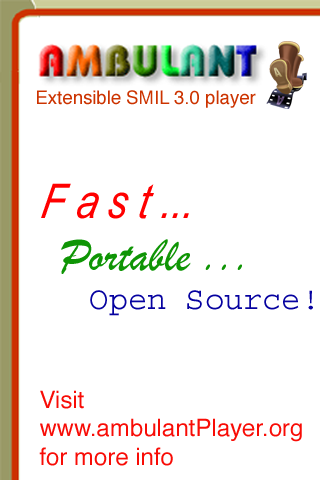
<style>
.page{position:relative;width:320px;height:480px;background:#ffffff}
.page>*{position:absolute;margin:0}
.t1{font:18.6px "Helvetica";color:#cc3300}
.t2{font:48px "ArialNarrow-Italic";color:#ff0000;font-style:italic}
.t3{font:47.8px "BrushScriptMT";color:#0f9505}
.t4{font:32px "Courier";color:#0602a0}
.t5{font:24px "Helvetica";color:#f80c06}
</style>
<div class="page">
<p class="t1" style="left:37px;top:90px;width:219px;height:18px">Extensible SMIL 3.0 player</p>
<p class="t2" style="left:41px;top:183px;width:148px;height:36px">F a s t ...</p>
<p class="t3" style="left:61px;top:239px;width:181px;height:35px">Portable ...</p>
<p class="t4" style="left:90px;top:290px;width:223px;height:26px">Open Source!</p>
<p class="t5" style="left:39px;top:390px;width:263px;height:76px">Visit<br>www.ambulantPlayer.org<br>for more info</p>
</div>
